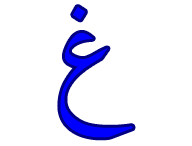
<style>
.page{position:relative;width:192px;height:146px;background:#ffffff}
.page>*{position:absolute;margin:0}
.t1{font:150px "TraditionalArabic";color:#0000ff}
</style>
<div class="page">
<p class="t1" style="left:60px;top:7px;width:73px;height:131px">غ</p>
</div>
